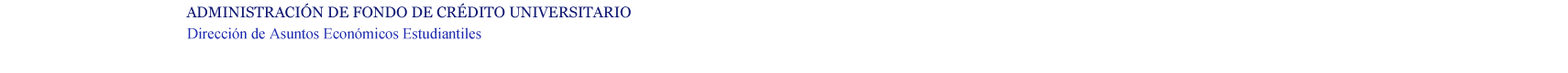
<style>
.page{position:relative;width:1568px;height:73px;background:#ffffff}
.page>*{position:absolute;margin:0}
.t1{font:15.3px "Georgia";color:#0d1770}
.t2{font:15.3px "TimesNewRomanPSMT";color:#1f2cae}
</style>
<div class="page">
<p class="t1" style="left:186px;top:3px;width:445px;height:15px">ADMINISTRACIÓN DE FONDO DE CRÉDITO UNIVERSITARIO</p>
<p class="t2" style="left:187px;top:28px;width:294px;height:11px">Dirección de Asuntos Económicos Estudiantiles</p>
</div>
